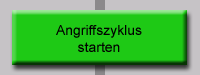
<style>
.page{position:relative;width:200px;height:75px;background:#1ec915}
.page>*{position:absolute;margin:0}
.t1{font:14px "ArialMT";color:#000000}
</style>
<div class="page">
<p class="t1" style="left:56px;top:25px;width:86px;height:27px;text-align:center">Angriffszyklus<br>starten</p>
</div>
